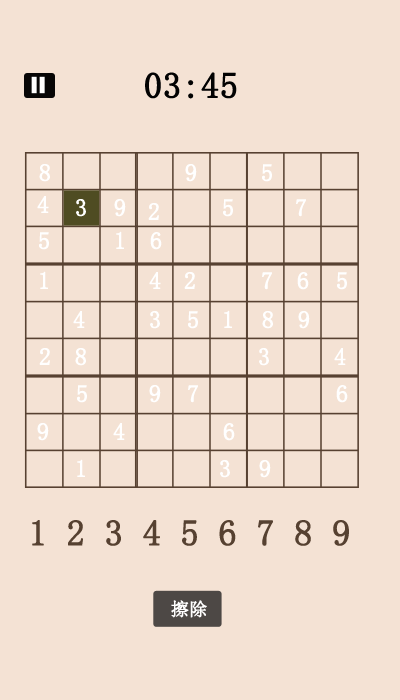
<style>
.page{position:relative;width:400px;height:700px;background:#f4e2d4}
.page>*{position:absolute;margin:0}
.t1{font:36px "SimSun";color:#020202;font-weight:bold}
.t2{font:24px "SimSun";color:#ffffff;font-weight:bold}
.t3{font:36px "SimSun";color:#564131;font-weight:bold}
.t4{font:18px "SimSun";color:#ffffff;font-weight:bold}
</style>
<div class="page">
<p class="t1" style="left:145px;top:72px;width:92px;height:27px">03:45</p>
<p class="t2" style="left:39px;top:164px;width:11px;height:18px">8</p>
<p class="t2" style="left:185px;top:164px;width:12px;height:18px">9</p>
<p class="t2" style="left:262px;top:164px;width:10px;height:18px">5</p>
<p class="t2" style="left:37px;top:196px;width:12px;height:17px">4</p>
<p class="t2" style="left:76px;top:199px;width:10px;height:18px">3</p>
<p class="t2" style="left:114px;top:199px;width:12px;height:18px">9</p>
<p class="t2" style="left:148px;top:203px;width:11px;height:17px">2</p>
<p class="t2" style="left:223px;top:199px;width:10px;height:18px">5</p>
<p class="t2" style="left:296px;top:199px;width:10px;height:18px">7</p>
<p class="t2" style="left:39px;top:232px;width:10px;height:18px">5</p>
<p class="t2" style="left:116px;top:231px;width:8px;height:18px">1</p>
<p class="t2" style="left:150px;top:232px;width:12px;height:18px">6</p>
<p class="t2" style="left:40px;top:271px;width:8px;height:18px">1</p>
<p class="t2" style="left:149px;top:272px;width:12px;height:17px">4</p>
<p class="t2" style="left:184px;top:272px;width:11px;height:17px">2</p>
<p class="t2" style="left:262px;top:272px;width:10px;height:18px">7</p>
<p class="t2" style="left:297px;top:272px;width:12px;height:18px">6</p>
<p class="t2" style="left:337px;top:272px;width:10px;height:18px">5</p>
<p class="t2" style="left:73px;top:311px;width:12px;height:17px">4</p>
<p class="t2" style="left:150px;top:311px;width:10px;height:18px">3</p>
<p class="t2" style="left:188px;top:311px;width:10px;height:18px">5</p>
<p class="t2" style="left:224px;top:310px;width:8px;height:18px">1</p>
<p class="t2" style="left:262px;top:311px;width:11px;height:18px">8</p>
<p class="t2" style="left:298px;top:311px;width:12px;height:18px">9</p>
<p class="t2" style="left:39px;top:348px;width:11px;height:17px">2</p>
<p class="t2" style="left:75px;top:348px;width:11px;height:18px">8</p>
<p class="t2" style="left:259px;top:348px;width:10px;height:18px">3</p>
<p class="t2" style="left:334px;top:348px;width:12px;height:17px">4</p>
<p class="t2" style="left:77px;top:385px;width:10px;height:18px">5</p>
<p class="t2" style="left:149px;top:385px;width:12px;height:18px">9</p>
<p class="t2" style="left:188px;top:385px;width:10px;height:18px">7</p>
<p class="t2" style="left:336px;top:385px;width:12px;height:18px">6</p>
<p class="t2" style="left:37px;top:423px;width:12px;height:18px">9</p>
<p class="t2" style="left:113px;top:423px;width:12px;height:17px">4</p>
<p class="t2" style="left:223px;top:423px;width:12px;height:18px">6</p>
<p class="t2" style="left:77px;top:459px;width:8px;height:18px">1</p>
<p class="t2" style="left:220px;top:460px;width:10px;height:18px">3</p>
<p class="t2" style="left:259px;top:460px;width:12px;height:18px">9</p>
<p class="t3" style="left:32px;top:520px;width:317px;height:26px">1 2 3 4 5 6 7 8 9</p>
<p class="t4" style="left:171px;top:600px;width:36px;height:18px">擦除</p>
</div>
